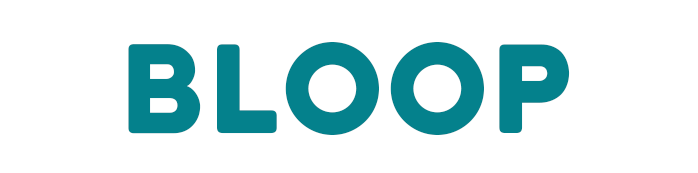
<style>
.page{position:relative;width:698px;height:173px;background:#ffffff}
.page>*{position:absolute;margin:0}
.t1{font:119.8px "KatahdinRound-Regular";color:#04818c}
</style>
<div class="page">
<p class="t1" style="left:128px;top:42px;width:442px;height:93px">BLOOP</p>
</div>
